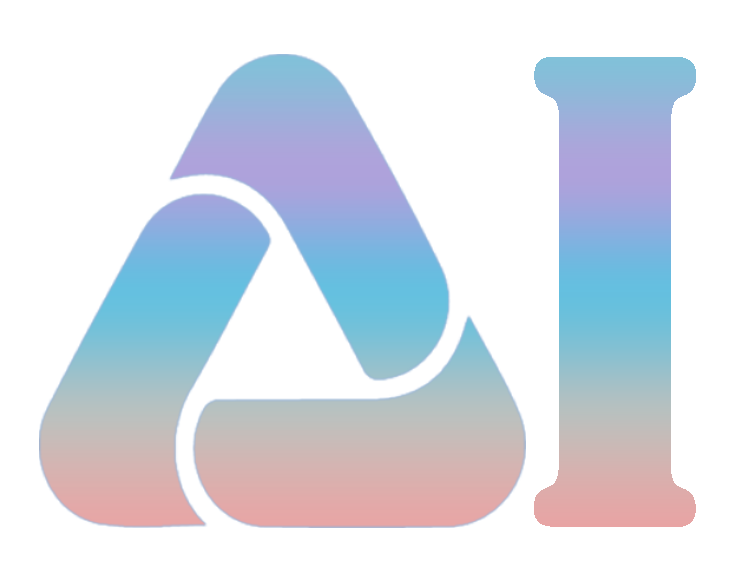
<style>
.page{position:relative;width:736px;height:582px;background:#ffffff}
.page>*{position:absolute;margin:0}
.t1{font:703px "Stencil";scale:0.73 1}
</style>
<div class="page">
<p class="t1" style="left:534px;top:57px;width:162px;height:470px">I</p>
</div>
